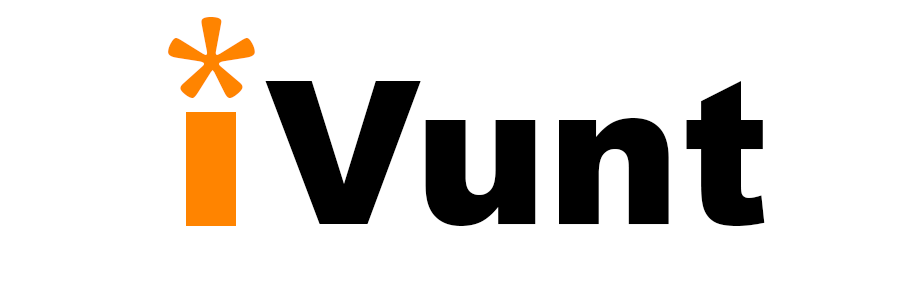
<style>
.page{position:relative;width:900px;height:300px;background:#ffffff}
.page>*{position:absolute;margin:0}
.t1{font:300.2px "GoudyOldStyleT-Regular";color:#ff8400}
.t2{font:200px "Arial-Black";color:#000000}
</style>
<div class="page">
<p class="t1" style="left:168px;top:17px;width:87px;height:81px">*</p>
<p class="t2" style="left:265px;top:81px;width:500px;height:145px">Vunt</p>
</div>
